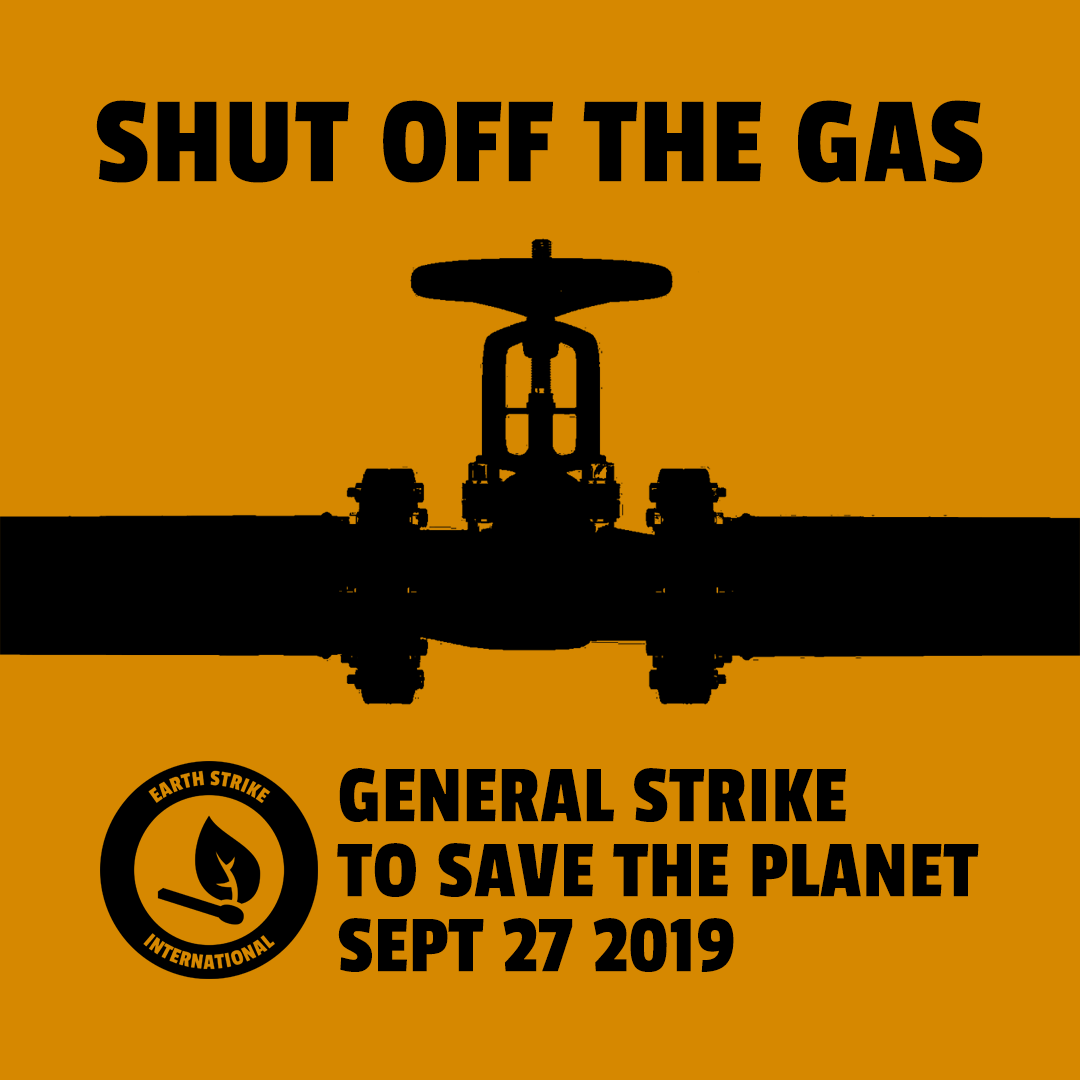
<style>
.page{position:relative;width:1080px;height:1080px;background:#d68800}
.page>*{position:absolute;margin:0}
.t1{font:127.4px "PassionOne-Regular";letter-spacing:0.02em;color:#000000;text-transform:uppercase}
.t2{font:84.2px/75.1px "PassionOne-Regular";letter-spacing:0.01em;color:#000000}
</style>
<div class="page">
<p class="t1" style="left:96px;top:100px;width:887px;height:83px">shut off the gas</p>
<p class="t2" style="left:337px;top:768px;width:642px;height:204px">GENERAL STRIKE<br>TO SAVE THE PLANET<br>SEPT 27 2019</p>
</div>
